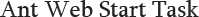
<style>
.page{position:relative;width:199px;height:17px;background:#ffffff}
.page>*{position:absolute;margin:0}
.t1{font:24px "Sylfaen";color:#222222}
</style>
<div class="page">
<p class="t1" style="left:0px;top:0px;width:199px;height:17px">Ant Web Start Task</p>
</div>
